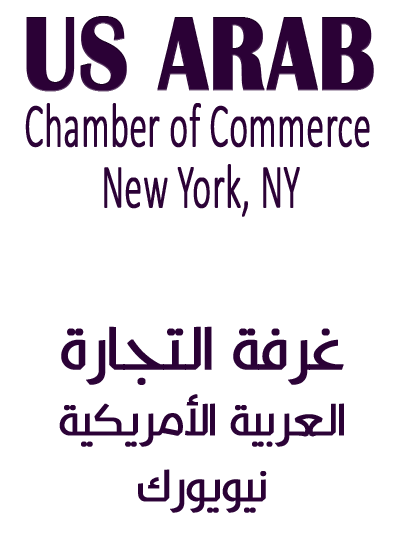
<style>
.page{position:relative;width:406px;height:536px;background:#ffffff}
.page>*{position:absolute;margin:0}
.t1{font:108px "BritannicBold";color:#2b0136;font-weight:bold;scale:0.82 1}
.t2{font:63px "Calibri-Light";color:#2b0136;font-weight:bold;scale:0.56 1}
.t3{font:43px/66px "KufyanArabic-Regular";color:#2b0136;font-weight:bold}
.t4{font:58px/66px "KufyanArabic-Regular";color:#2b0136;font-weight:bold}
</style>
<div class="page">
<p class="t1" style="left:26px;top:16px;width:348px;height:76px">US ARAB</p>
<p class="t2" style="left:25px;top:103px;width:345px;height:45px">Chamber of Commerce</p>
<p class="t2" style="left:104px;top:164px;width:196px;height:53px">New York, NY</p>
<p class="t3" style="left:59px;top:326px;width:285px;height:187px;text-align:center"><span class="t4">غرفة التجارة<br></span>العربية الأمريكية<br>نيويورك</p>
</div>
